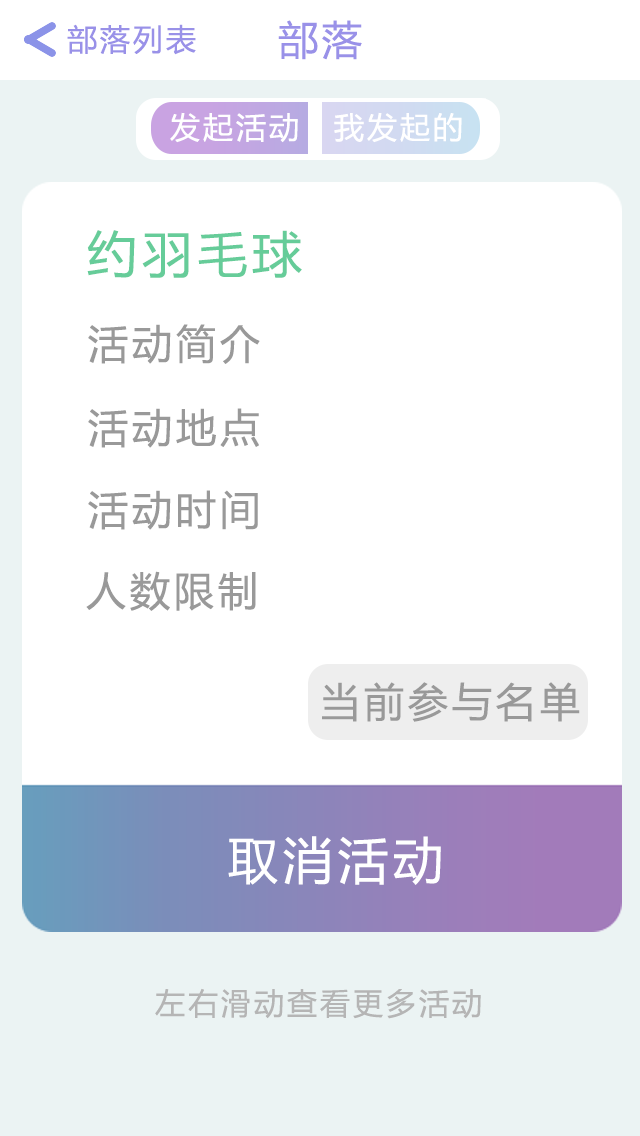
<style>
.page{position:relative;width:640px;height:1136px;background:#ffffff}
.page>*{position:absolute;margin:0}
.t1{font:30px "MicrosoftYaHei";letter-spacing:0.1em;color:#9991e8}
.t2{font:40px "MicrosoftYaHei";letter-spacing:0.1em;color:#9991e8}
.t3{font:30px "MicrosoftYaHei";letter-spacing:0.1em;color:#ffffff}
.t4{font:50px "MicrosoftYaHei";letter-spacing:0.1em;color:#66cc99}
.t5{font:40px "MicrosoftYaHei";letter-spacing:0.1em;color:#999999}
.t6{font:50px "MicrosoftYaHei";letter-spacing:0.1em;color:#ffffff}
.t7{font:30px "MicrosoftYaHei";letter-spacing:0.1em;color:#b5b5b5}
</style>
<div class="page">
<p class="t1" style="left:67px;top:24px;width:129px;height:31px">部落列表</p>
<p class="t2" style="left:278px;top:20px;width:84px;height:40px">部落</p>
<p class="t3" style="left:170px;top:112px;width:128px;height:31px">发起活动</p>
<p class="t3" style="left:334px;top:112px;width:128px;height:31px">我发起的</p>
<p class="t4" style="left:87px;top:230px;width:215px;height:48px">约羽毛球</p>
<p class="t5" style="left:88px;top:324px;width:172px;height:40px">活动简介</p>
<p class="t5" style="left:88px;top:408px;width:171px;height:40px">活动地点</p>
<p class="t5" style="left:88px;top:490px;width:170px;height:40px">活动时间</p>
<p class="t5" style="left:86px;top:571px;width:170px;height:40px">人数限制</p>
<p class="t5" style="left:322px;top:682px;width:258px;height:40px">当前参与名单</p>
<p class="t6" style="left:228px;top:836px;width:213px;height:49px">取消活动</p>
<p class="t7" style="left:155px;top:988px;width:326px;height:31px">左右滑动查看更多活动</p>
</div>
